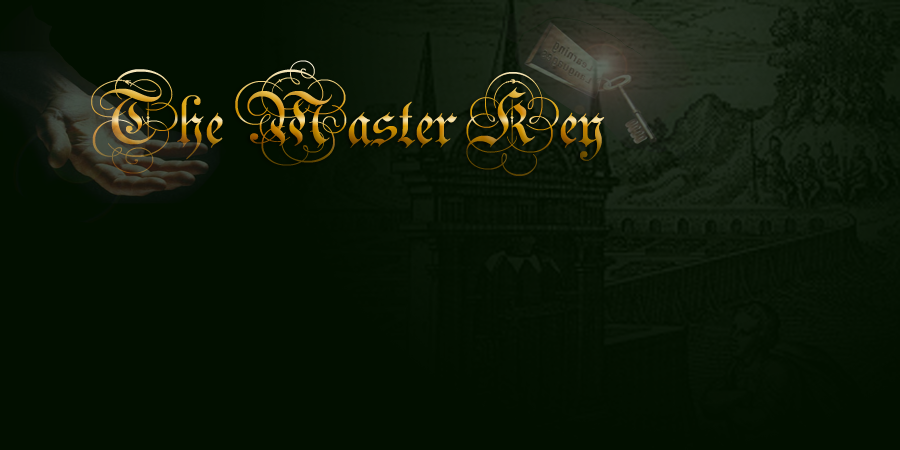
<style>
.page{position:relative;width:900px;height:450px;background:#020f00}
.page>*{position:absolute;margin:0}
.t1{font:120px "Parchment-Regular"}
</style>
<div class="page">
<p class="t1" style="left:91px;top:60px;width:514px;height:116px">The Master Key</p>
</div>
